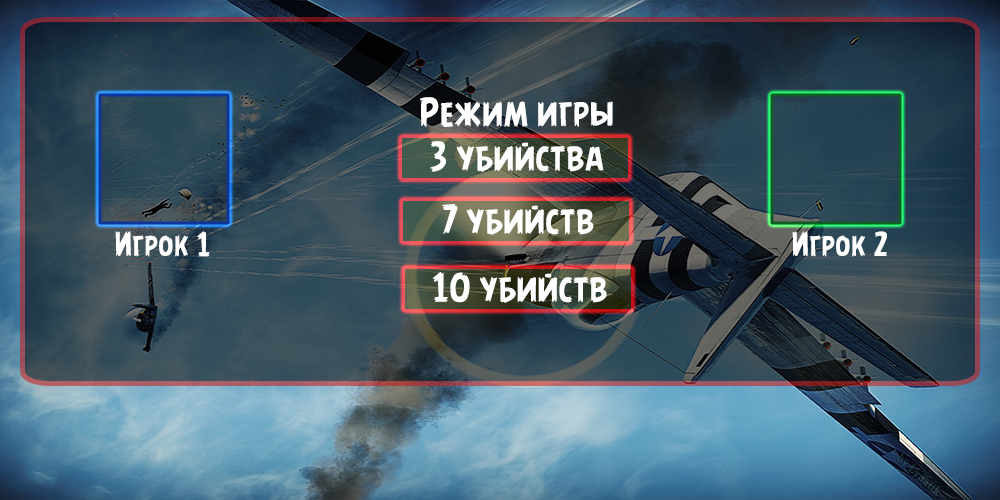
<style>
.page{position:relative;width:1000px;height:500px}
.page>*{position:absolute;margin:0}
.t1{font:36px "AngryBirds-Regular";color:#ffffff;font-weight:bold}
.t2{font:36.2px "AngryBirds-Regular";color:#ffffff;font-weight:bold}
.t3{font:30px "AngryBirds-Regular";color:#ffffff;font-weight:bold}
.t4{font:29.9px "AngryBirds-Regular";color:#ffffff;font-weight:bold}
</style>
<div class="page">
<p class="t1" style="left:420px;top:97px;width:193px;height:30px">Режим игры</p>
<p class="t2" style="left:430px;top:141px;width:174px;height:31px">3 убийства</p>
<p class="t2" style="left:442px;top:204px;width:152px;height:31px">7 убийств</p>
<p class="t3" style="left:115px;top:231px;width:95px;height:26px">Игрок 1</p>
<p class="t4" style="left:792px;top:231px;width:95px;height:26px">Игрок 2</p>
<p class="t2" style="left:432px;top:272px;width:175px;height:31px">10 убийств</p>
</div>
